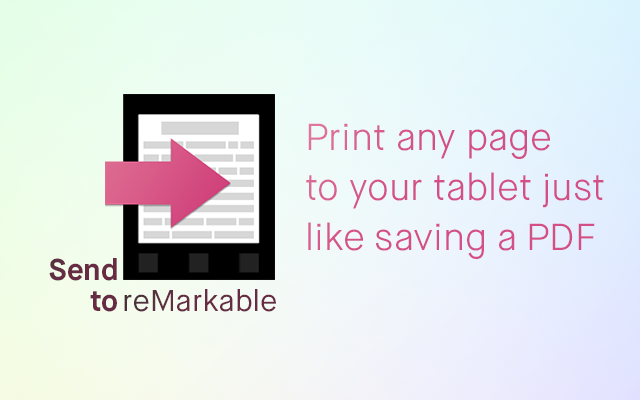
<style>
.page{position:relative;width:640px;height:400px}
.page>*{position:absolute;margin:0}
.t1{font:37.5px/50.1px "MaisonNeue-Light";color:#d34f85}
.t2{font:30px "MaisonNeue-Bold";color:#672c44}
.t3{font:30px "MaisonNeue-Book";color:#672c44}
</style>
<div class="page">
<p class="t1" style="left:306px;top:123px;width:298px;height:136px">Print any page<br>to your tablet just like saving a PDF</p>
<p class="t2" style="left:49px;top:258px;width:68px;height:23px">Send</p>
<p class="t2" style="left:90px;top:291px;width:27px;height:21px">to</p>
<p class="t3" style="left:124px;top:289px;width:152px;height:23px">reMarkable</p>
</div>
